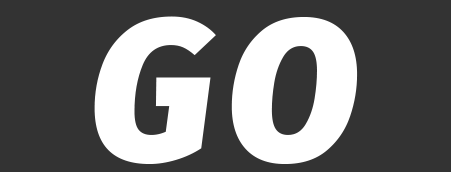
<style>
.page{position:relative;width:451px;height:172px;background:#333333}
.page>*{position:absolute;margin:0}
.t1{font:200px "FiraSans-BlackItalic";letter-spacing:0.07em;color:#ffffff;scale:0.96 1}
</style>
<div class="page">
<p class="t1" style="left:94px;top:16px;width:264px;height:148px">GO</p>
</div>
